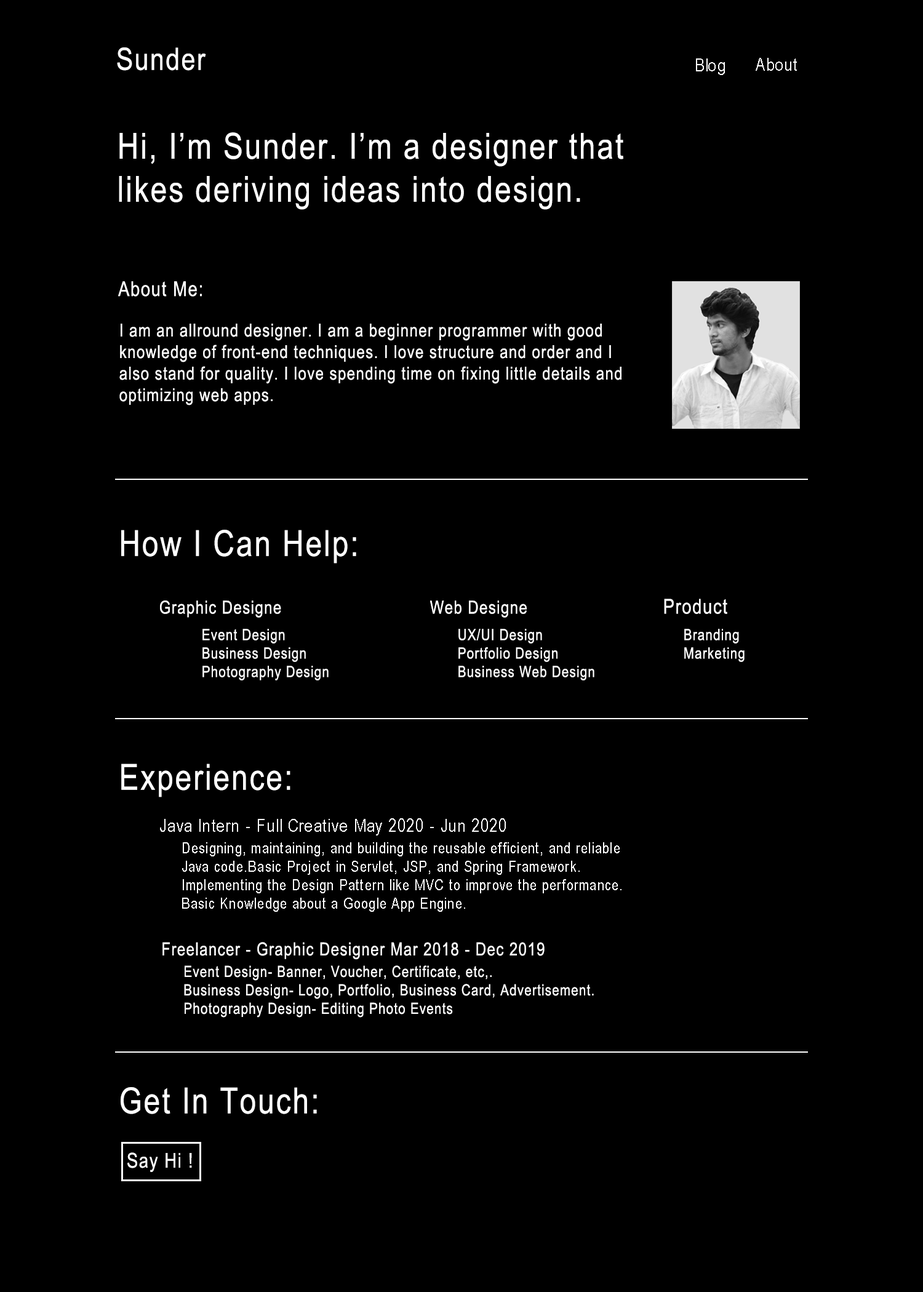
<style>
.page{position:relative;width:923px;height:1292px;background:#000000}
.page>*{position:absolute;margin:0}
.t1{font:30.8px "ArialNarrow";letter-spacing:0.05em;color:#ffffff}
.t2{font:17.9px "ArialNarrow";letter-spacing:0.05em;color:#ffffff}
.t3{font:35.9px "ArialNarrow";letter-spacing:0.05em;color:#ffffff}
.t4{font:20.5px "ArialNarrow";letter-spacing:0.05em;color:#ffffff}
.t5{font:15.4px "ArialNarrow";letter-spacing:0.05em;color:#ffffff}
</style>
<div class="page">
<p class="t1" style="left:117px;top:47px;width:89px;height:24px">Sunder</p>
<p class="t2" style="left:696px;top:58px;width:29px;height:17px">Blog</p>
<p class="t2" style="left:756px;top:58px;width:41px;height:13px">About</p>
<p class="t3" style="left:119px;top:132px;width:504px;height:78px">Hi, I’m Sunder. I’m a designer that<br>likes deriving ideas into design.</p>
<p class="t4" style="left:118px;top:281px;width:84px;height:16px">About Me:</p>
<p class="t2" style="left:119px;top:324px;width:502px;height:81px">I am an allround designer. I am a beginner programmer with good knowledge of front-end techniques. I love structure and order and I also stand for quality. I love spending time on fixing little details and optimizing web apps.</p>
<p class="t3" style="left:121px;top:530px;width:235px;height:34px">How I Can Help:</p>
<p class="t2" style="left:160px;top:600px;width:121px;height:18px">Graphic Designe</p>
<p class="t2" style="left:430px;top:600px;width:97px;height:18px">Web Designe</p>
<p class="t4" style="left:664px;top:599px;width:63px;height:15px">Product</p>
<p class="t5" style="left:202px;top:629px;width:127px;height:51px">Event Design<br>Business Design<br>Photography Design</p>
<p class="t5" style="left:458px;top:629px;width:136px;height:51px">UX/UI Design<br>Portfolio Design<br>Business Web Design</p>
<p class="t5" style="left:684px;top:629px;width:60px;height:33px">Branding<br>Marketing</p>
<p class="t3" style="left:121px;top:764px;width:169px;height:33px">Experience:</p>
<p class="t5" style="left:160px;top:818px;width:461px;height:94px"><span class="t2">Java Intern - Full Creative May 2020 - Jun 2020<br> </span>Designing, maintaining, and building the reusable efficient, and reliable      <br> Java code.Basic Project in Servlet, JSP, and Spring Framework.<br> Implementing the Design Pattern like MVC to improve the performance.<br> Basic Knowledge about a Google App Engine.<br><span class="t2"><br>Implementing GIT for version control.<br><br>Possess good verbal and written communication skills.</span></p>
<p class="t5" style="left:162px;top:942px;width:432px;height:76px"><span class="t2">Freelancer - Graphic Designer Mar 2018 - Dec 2019<br> </span>Event Design- Banner, Voucher, Certificate, etc,.<br> Business Design- Logo, Portfolio, Business Card, Advertisement.<br> Photography Design- Editing Photo Events</p>
<p class="t3" style="left:121px;top:1087px;width:196px;height:27px">Get In Touch:</p>
<p class="t4" style="left:127px;top:1152px;width:65px;height:20px">Say Hi !</p>
</div>
